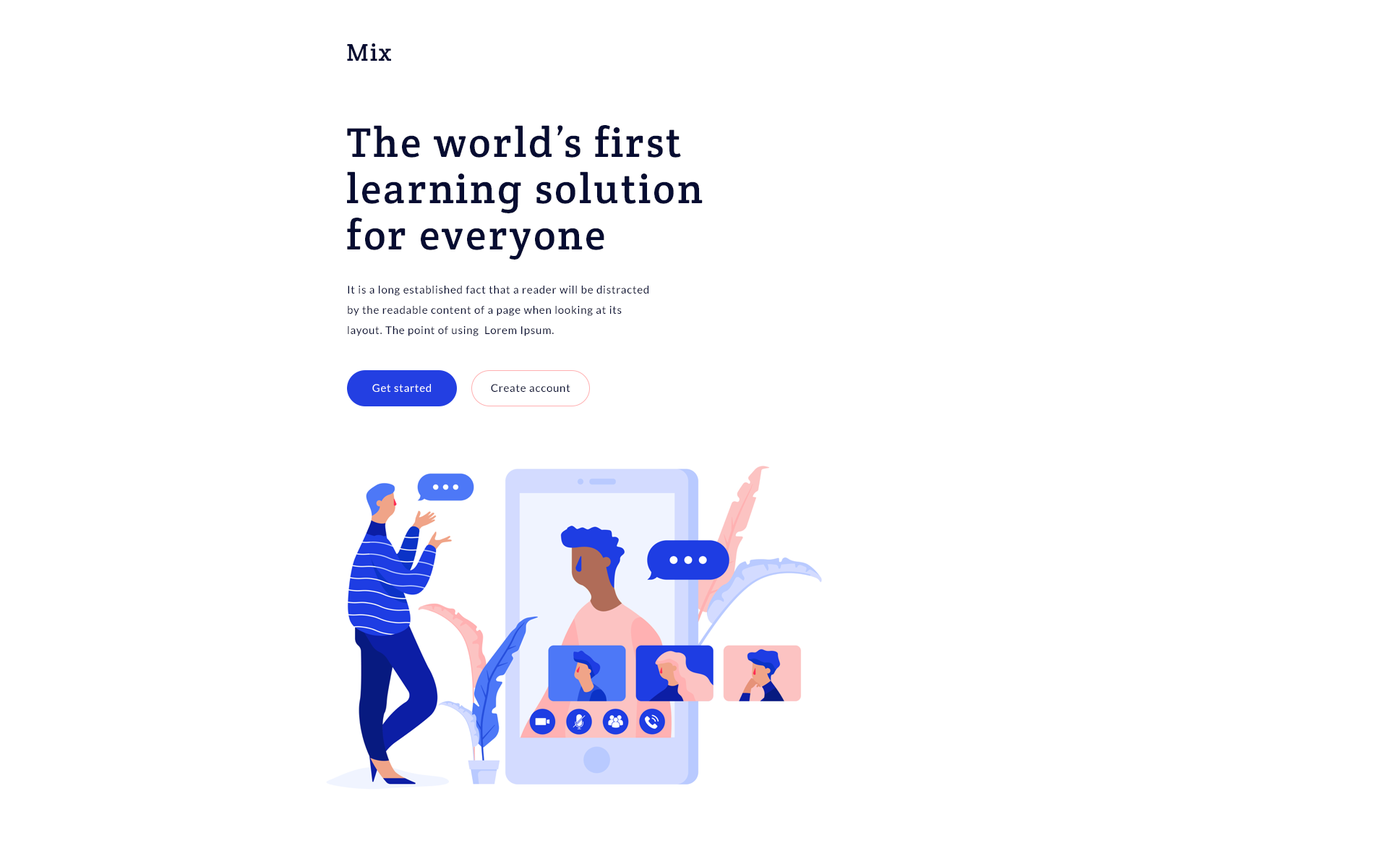
<style>
.page{position:relative;width:1388px;height:859px;background:#ffffff}
.page>*{position:absolute;margin:0}
.t1{font:24.6px "CreteRound-Regular";letter-spacing:0.05em;color:#060c31}
.t2{font:41.9px/46.3px "CreteRound-Regular";letter-spacing:0.05em;color:#060c31}
.t3{font:10.8px/20.2px "Lato-Regular";letter-spacing:0.05em;color:#060c31}
.t4{font:10.8px "Lato-Regular";letter-spacing:0.05em;color:#ffffff}
.t5{font:10.8px "Lato-Regular";letter-spacing:0.05em;color:#060c31}
</style>
<div class="page">
<p class="t1" style="left:347px;top:43px;width:44px;height:18px">Mix</p>
<p class="t2" style="left:347px;top:125px;width:356px;height:135px">The world’s first<br>learning solution<br>for everyone</p>
<p class="t3" style="left:348px;top:286px;width:301px;height:50px">It is a long established fact that a reader will be distracted<br>by the readable content of a page when looking at its<br>layout. The point of using  Lorem Ipsum.</p>
<p class="t4" style="left:372px;top:384px;width:59px;height:8px">Get started</p>
<p class="t5" style="left:491px;top:384px;width:79px;height:8px">Create account</p>
</div>
